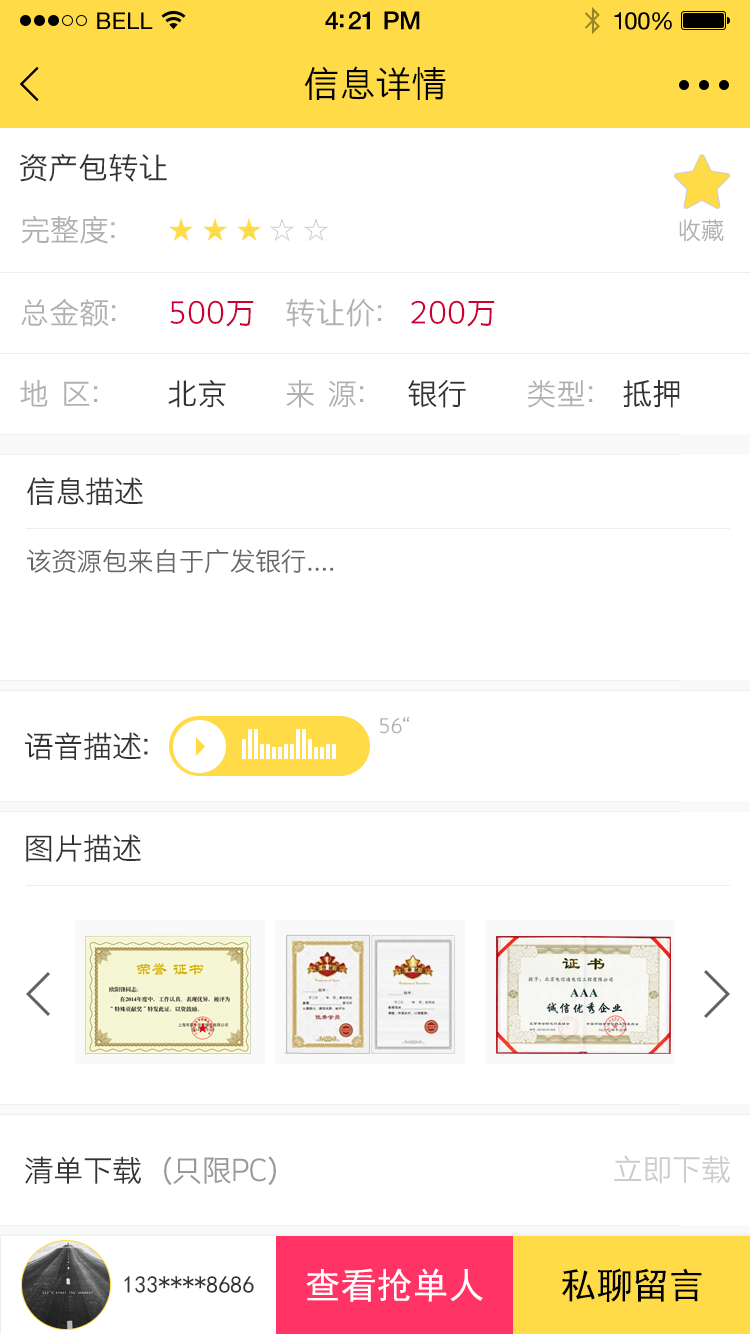
<style>
.page{position:relative;width:750px;height:1334px;background:#ffffff}
.page>*{position:absolute;margin:0}
.t1{font:23px "HelveticaNeue";letter-spacing:0.02em;color:#000000}
.t2{font:25px "HelveticaNeue-Medium";letter-spacing:-0.02em;color:#000000}
.t3{font:24px "HelveticaNeue";letter-spacing:-0.02em;color:#010101}
.t4{font:36px "STHeitiSC-Light";color:#000000}
.t5{font:30px "STHeitiSC-Light";color:#333333}
.t6{font:30px "STHeitiSC-Light";letter-spacing:-0.02em;color:#b0b0b0}
.t7{font:24px "STHeitiSC-Light";letter-spacing:-0.02em;color:#b0b0b0}
.t8{font:30px "STHeitiSC-Light";color:#b0b0b0}
.t9{font:30px "STHeitiSC-Light";color:#cc0033}
.t10{font:30px "STHeitiSC-Light";letter-spacing:-0.02em;color:#333333}
.t11{font:26px "STHeitiSC-Light";letter-spacing:-0.02em;color:#666666}
.t12{font:20px "STHeitiSC-Light";color:#afafaf}
.t13{font:30px "STHeitiSC-Light";letter-spacing:-0.02em;color:#999999}
.t14{font:30px "STHeitiSC-Light";letter-spacing:-0.02em;color:#cccccc}
.t15{font:24px "SimHei";color:#333333}
.t16{font:36px "SimHei";color:#ffffff}
.t17{font:36px "SimHei";color:#000000}
</style>
<div class="page">
<p class="t1" style="left:97px;top:12px;width:56px;height:17px">BELL</p>
<p class="t1" style="left:97px;top:12px;width:56px;height:17px">BELL</p>
<p class="t2" style="left:325px;top:11px;width:95px;height:19px">4:21 PM</p>
<p class="t2" style="left:325px;top:11px;width:95px;height:19px">4:21 PM</p>
<p class="t3" style="left:614px;top:12px;width:58px;height:18px">100%</p>
<p class="t3" style="left:614px;top:12px;width:58px;height:18px">100%</p>
<p class="t4" style="left:304px;top:66px;width:142px;height:34px">信息详情</p>
<p class="t5" style="left:19px;top:153px;width:148px;height:29px">资产包转让</p>
<p class="t6" style="left:21px;top:215px;width:94px;height:29px">完整度：</p>
<p class="t7" style="left:679px;top:219px;width:45px;height:23px">收藏</p>
<p class="t8" style="left:21px;top:298px;width:95px;height:29px">总金额：</p>
<p class="t9" style="left:170px;top:300px;width:84px;height:27px">500万</p>
<p class="t8" style="left:286px;top:298px;width:96px;height:29px">转让价：</p>
<p class="t9" style="left:411px;top:300px;width:84px;height:27px">200万</p>
<p class="t8" style="left:20px;top:380px;width:78px;height:27px">地  区：</p>
<p class="t5" style="left:168px;top:379px;width:58px;height:29px">北京</p>
<p class="t8" style="left:286px;top:380px;width:78px;height:28px">来  源：</p>
<p class="t5" style="left:408px;top:379px;width:58px;height:29px">银行</p>
<p class="t8" style="left:528px;top:380px;width:65px;height:28px">类型：</p>
<p class="t5" style="left:623px;top:380px;width:57px;height:28px">抵押</p>
<p class="t10" style="left:27px;top:477px;width:116px;height:28px">信息描述</p>
<p class="t11" style="left:27px;top:549px;width:307px;height:24px">该资源包来自于广发银行....</p>
<p class="t12" style="left:379px;top:717px;width:31px;height:17px">56“</p>
<p class="t10" style="left:25px;top:732px;width:123px;height:28px">语音描述：</p>
<p class="t10" style="left:26px;top:834px;width:115px;height:28px">图片描述</p>
<p class="t13" style="left:25px;top:1156px;width:251px;height:29px"><span class="t10">清单下载   </span>（只限PC）</p>
<p class="t14" style="left:614px;top:1155px;width:116px;height:29px">立即下载</p>
<p class="t15" style="left:124px;top:1276px;width:130px;height:17px">133****8686</p>
<p class="t16" style="left:306px;top:1268px;width:177px;height:34px">查看抢单人</p>
<p class="t17" style="left:562px;top:1268px;width:140px;height:34px">私聊留言</p>
</div>
